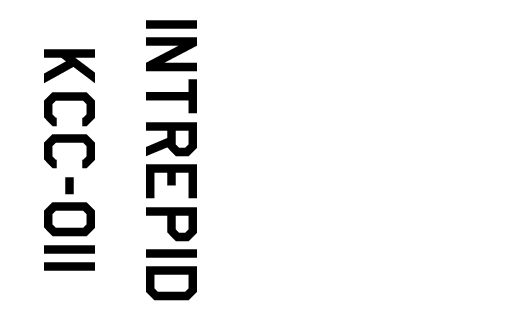
<style>
.page{position:relative;width:512px;height:320px;background:#ffffff}
.page>*{position:absolute;margin:0}
.t1{font:85px "AmarilloUSAF";color:#000000}
</style>
<div class="page">
<p class="t1" style="left:44px;top:20px;width:153px;height:281px;text-align:center;rotate:90deg">INTREPID<br>KCC-011</p>
</div>
